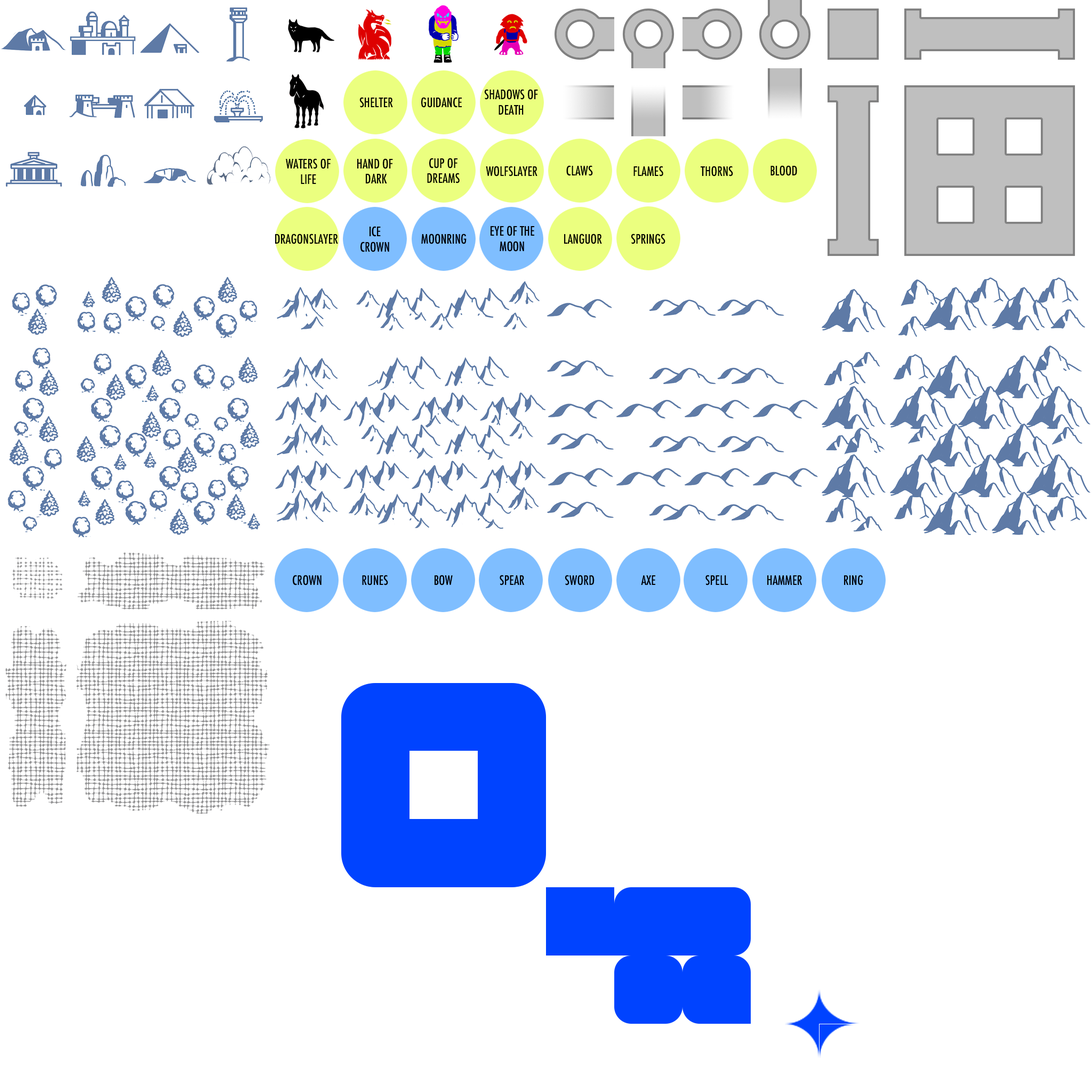
<style>
.page{position:relative;width:1092px;height:1092px;background:#ffffff}
.page>*{position:absolute;margin:0}
.t1{font:12.8px "Futura-CondensedMedium";color:#000000}
</style>
<div class="page">
<p class="t1" style="left:484px;top:89px;width:54px;height:26px;text-align:center">SHADOWS OF<br>DEATH</p>
<p class="t1" style="left:359px;top:97px;width:34px;height:11px">SHELTER</p>
<p class="t1" style="left:421px;top:97px;width:41px;height:11px">GUIDANCE</p>
<p class="t1" style="left:286px;top:158px;width:45px;height:26px;text-align:center">WATERS OF<br>LIFE</p>
<p class="t1" style="left:357px;top:158px;width:36px;height:25px;text-align:center">HAND OF <br>DARK</p>
<p class="t1" style="left:427px;top:158px;width:33px;height:25px;text-align:center">CUP OF<br>DREAMS</p>
<p class="t1" style="left:486px;top:166px;width:51px;height:10px">WOLFSLAYER</p>
<p class="t1" style="left:566px;top:165px;width:27px;height:11px">CLAWS</p>
<p class="t1" style="left:633px;top:166px;width:30px;height:10px">FLAMES</p>
<p class="t1" style="left:701px;top:166px;width:32px;height:10px">THORNS</p>
<p class="t1" style="left:770px;top:165px;width:27px;height:11px">BLOOD</p>
<p class="t1" style="left:275px;top:234px;width:63px;height:10px">DRAGONSLAYER</p>
<p class="t1" style="left:360px;top:226px;width:29px;height:26px;text-align:center">ICE<br>CROWN</p>
<p class="t1" style="left:421px;top:234px;width:46px;height:10px">MOONRING</p>
<p class="t1" style="left:491px;top:226px;width:43px;height:26px;text-align:center">EYE OF THE<br>MOON</p>
<p class="t1" style="left:564px;top:234px;width:38px;height:10px">LANGUOR</p>
<p class="t1" style="left:631px;top:234px;width:34px;height:10px">SPRINGS</p>
<p class="t1" style="left:293px;top:575px;width:29px;height:10px">CROWN</p>
<p class="t1" style="left:362px;top:575px;width:26px;height:10px">RUNES</p>
<p class="t1" style="left:435px;top:575px;width:18px;height:10px">BOW</p>
<p class="t1" style="left:500px;top:575px;width:24px;height:10px">SPEAR</p>
<p class="t1" style="left:565px;top:575px;width:30px;height:10px">SWORD</p>
<p class="t1" style="left:641px;top:575px;width:14px;height:10px">AXE</p>
<p class="t1" style="left:705px;top:575px;width:23px;height:10px">SPELL</p>
<p class="t1" style="left:767px;top:575px;width:35px;height:10px">HAMMER</p>
<p class="t1" style="left:844px;top:575px;width:19px;height:10px">RING</p>
</div>
